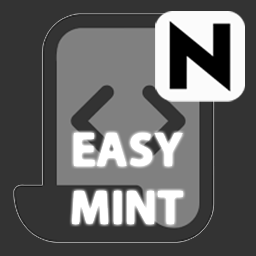
<style>
.page{position:relative;width:256px;height:256px;background:#333333}
.page>*{position:absolute;margin:0}
.t1{font:48px "MyriadPro-Bold";color:#ffffff}
</style>
<div class="page">
<p class="t1" style="left:72px;top:133px;width:111px;height:91px;text-align:center">EASY<br>MINT</p>
</div>
